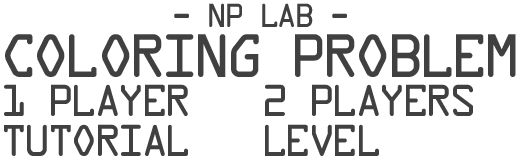
<style>
.page{position:relative;width:520px;height:160px;background:#ffffff}
.page>*{position:absolute;margin:0}
.t1{font:36px "DataControl";color:#404040}
.t2{font:66px "DataControl";color:#404040}
.t3{font:48px "DataControl";color:#404040}
</style>
<div class="page">
<p class="t1" style="left:174px;top:3px;width:173px;height:24px">- NP LAB -</p>
<p class="t2" style="left:5px;top:34px;width:511px;height:43px">Coloring Problem</p>
<p class="t3" style="left:4px;top:84px;width:184px;height:32px">1 player</p>
<p class="t3" style="left:265px;top:84px;width:208px;height:32px">2 players</p>
<p class="t3" style="left:4px;top:124px;width:184px;height:32px">Tutorial</p>
<p class="t3" style="left:265px;top:124px;width:114px;height:32px">Level</p>
</div>
